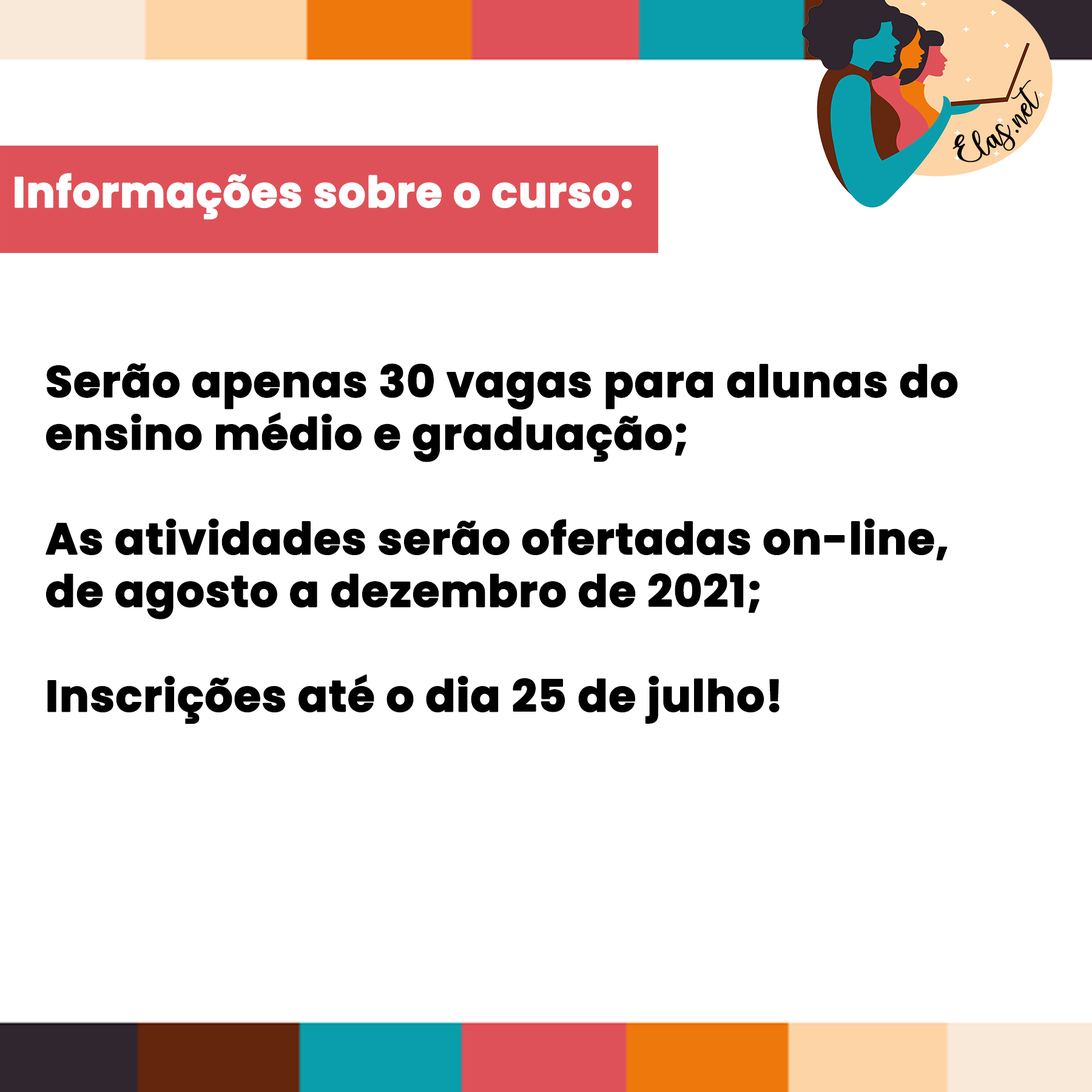
<style>
.page{position:relative;width:1092px;height:1092px;background:#ffffff}
.page>*{position:absolute;margin:0}
.t1{font:24.1px "charlinda-Regular";color:#000000;scale:1.18 1}
.t2{font:42.5px "Poppins-Bold";color:#ffffff;font-weight:bold}
.t3{font:43.7px "Poppins-Bold";color:#000000;font-weight:bold}
</style>
<div class="page">
<p class="t1" style="left:952px;top:80px;width:87px;height:83px;rotate:-41deg">Elas.net</p>
<p class="t2" style="left:15px;top:173px;width:617px;height:47px">Informações sobre o curso:</p>
<p class="t3" style="left:45px;top:363px;width:913px;height:361px">Serão apenas 30 vagas para alunas do ensino médio e graduação;<br><br>As atividades serão ofertadas on-line, de agosto a dezembro de 2021;<br><br>Inscrições até o dia 25 de julho!</p>
</div>
